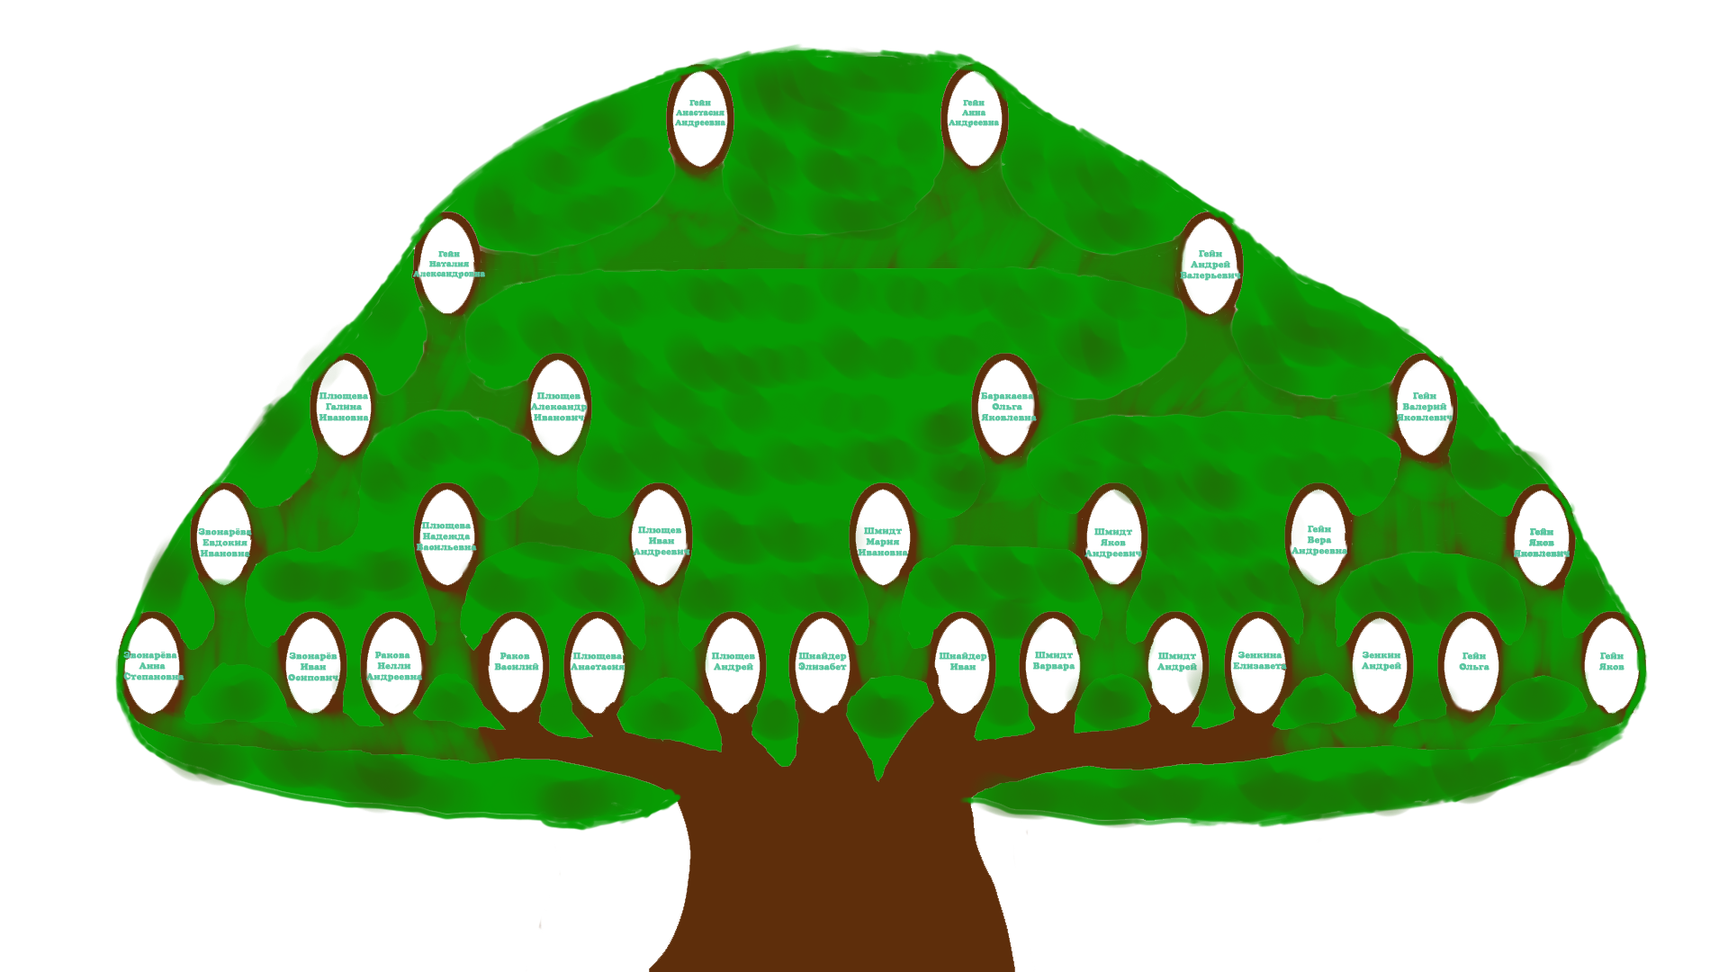
<style>
.page{position:relative;width:1728px;height:972px;background:#ffffff}
.page>*{position:absolute;margin:0}
.t1{font:8.1px "a_CooperBlack";color:#5bc7a2;font-weight:bold}
.t2{font:9px "a_CooperBlack";color:#5bc7a2;font-weight:bold}
</style>
<div class="page">
<p class="t1" style="left:674px;top:100px;width:51px;height:28px;text-align:center">Гейн<br>Анастасия<br>Андреевна</p>
<p class="t1" style="left:948px;top:100px;width:51px;height:28px;text-align:center">Гейн<br>Анна<br>Андреевна</p>
<p class="t1" style="left:412px;top:251px;width:73px;height:28px;text-align:center">Гейн<br>Наталия<br>Александровна</p>
<p class="t2" style="left:1180px;top:250px;width:61px;height:31px;text-align:center">Гейн<br>Андрей<br>Валерьевич</p>
<p class="t2" style="left:319px;top:392px;width:50px;height:29px;text-align:center">Плющева<br>Галина<br>Ивановна</p>
<p class="t2" style="left:530px;top:392px;width:58px;height:29px;text-align:center">Плющев<br>Александр<br>Иванович</p>
<p class="t2" style="left:981px;top:392px;width:56px;height:29px;text-align:center">Баракаева <br>Ольга <br>Яковлевна</p>
<p class="t2" style="left:1397px;top:392px;width:56px;height:29px;text-align:center">Гейн<br>Валерий<br>Яковлевич</p>
<p class="t2" style="left:198px;top:528px;width:54px;height:29px;text-align:center">Звонарёва<br>Евдокия<br>Ивановна</p>
<p class="t2" style="left:416px;top:522px;width:61px;height:29px;text-align:center">Плющева<br>Надежда<br>Васильевна</p>
<p class="t2" style="left:633px;top:526px;width:57px;height:31px;text-align:center">Плющев <br>Иван<br>Андреевич</p>
<p class="t2" style="left:858px;top:527px;width:50px;height:29px;text-align:center">Шмидт<br>Мария<br>Ивановна</p>
<p class="t2" style="left:1084px;top:528px;width:58px;height:31px;text-align:center">Шмидт<br>Яков<br>Андреевич</p>
<p class="t2" style="left:1292px;top:526px;width:55px;height:30px;text-align:center">Гейн<br>Вера<br>Андреевна</p>
<p class="t2" style="left:1514px;top:528px;width:56px;height:29px;text-align:center">Гейн<br>Яков<br>Яковлевич</p>
<p class="t2" style="left:1514px;top:528px;width:56px;height:29px;text-align:center">Гейн<br>Яков<br>Яковлевич</p>
<p class="t2" style="left:123px;top:652px;width:61px;height:28px;text-align:center">Звонарёва <br>Анна<br> Степановна</p>
<p class="t2" style="left:288px;top:652px;width:50px;height:29px;text-align:center">Звонарёв<br>Иван<br>Осипович</p>
<p class="t2" style="left:366px;top:652px;width:56px;height:30px;text-align:center">Ракова <br>Нелли<br>Андреевна</p>
<p class="t2" style="left:494px;top:652px;width:45px;height:18px;text-align:center">Раков <br>Василий</p>
<p class="t2" style="left:571px;top:652px;width:54px;height:18px;text-align:center">Плющева<br>Анастасия</p>
<p class="t2" style="left:711px;top:652px;width:44px;height:20px;text-align:center">Плющев<br>Андрей</p>
<p class="t2" style="left:798px;top:652px;width:49px;height:18px;text-align:center">Шнайдер<br>Элизабет</p>
<p class="t2" style="left:939px;top:652px;width:48px;height:18px;text-align:center">Шнайдер<br>Иван</p>
<p class="t2" style="left:1032px;top:652px;width:44px;height:19px;text-align:center">Шмидт<br>Варвара</p>
<p class="t2" style="left:1157px;top:652px;width:40px;height:20px;text-align:center">Шмидт<br>Андрей</p>
<p class="t2" style="left:1233px;top:652px;width:54px;height:18px;text-align:center">Зенкина<br>Елизавета</p>
<p class="t2" style="left:1362px;top:652px;width:39px;height:19px;text-align:center">Зенкин<br>Андрей</p>
<p class="t2" style="left:1459px;top:652px;width:31px;height:18px;text-align:center">Гейн<br>Ольга</p>
<p class="t2" style="left:1599px;top:652px;width:25px;height:18px;text-align:center">Гейн<br>Яков</p>
</div>
